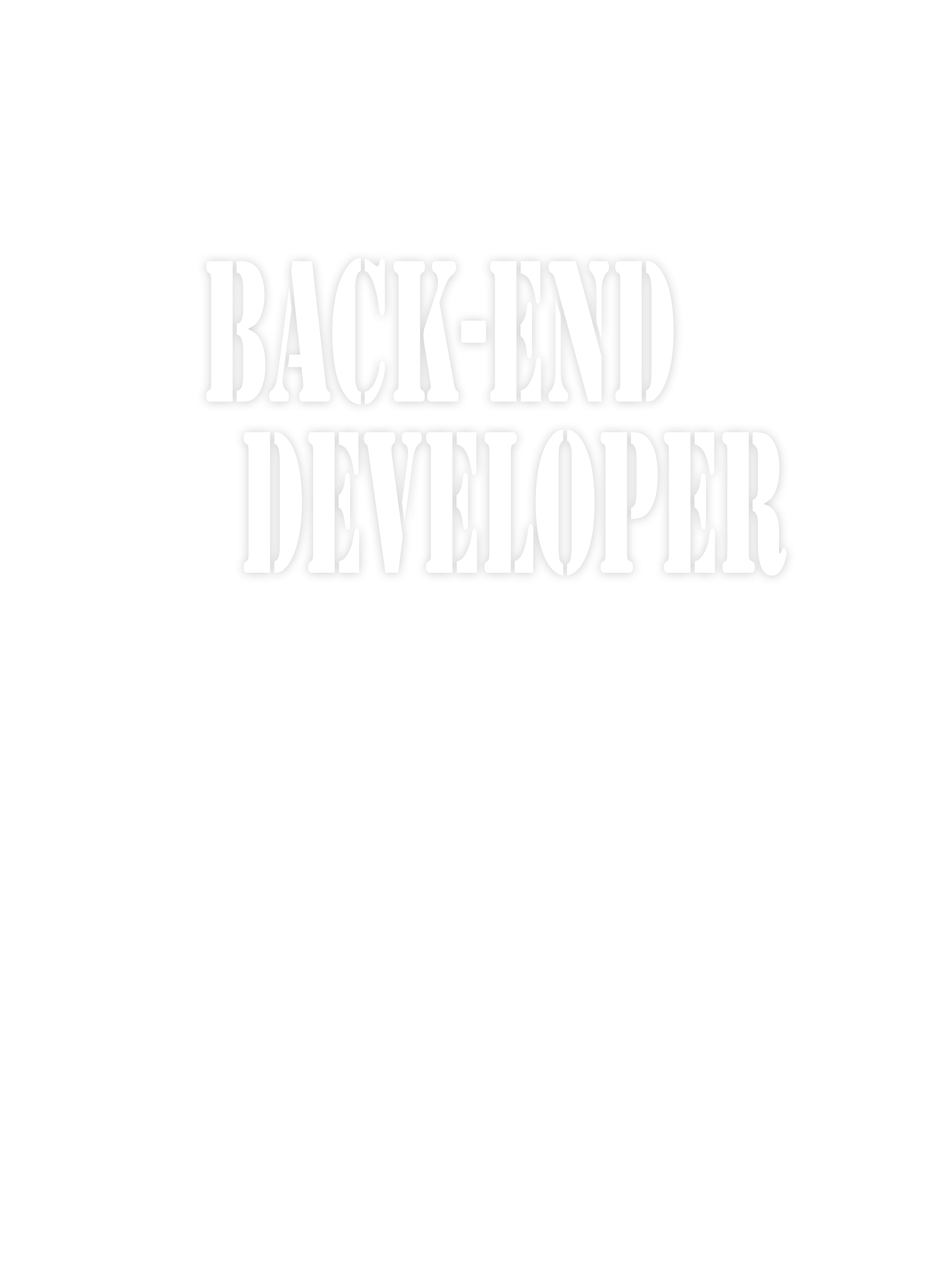
<style>
.page{position:relative;width:945px;height:1261px;background:#ffffff}
.page>*{position:absolute;margin:0}
.t1{font:210.9px/171.4px "Stencil";color:#ffffff;scale:0.47 1}
</style>
<div class="page">
<p class="t1" style="left:206px;top:258px;width:581px;height:318px;text-align:center">back-end<br>      Developer</p>
</div>
